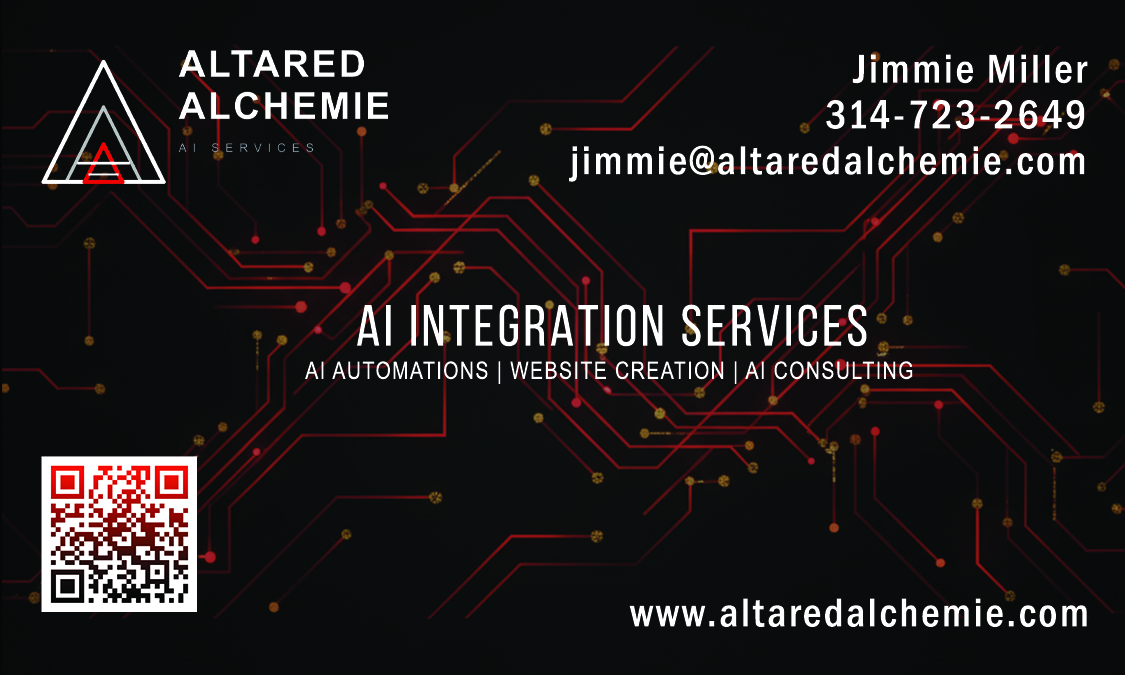
<style>
.page{position:relative;width:1125px;height:675px}
.page>*{position:absolute;margin:0}
.t1{font:41.7px/45.8px "FranklinGothic-MediumCond";letter-spacing:0.06em;color:#ffffff}
.t2{font:58px "BebasNeueRegular";letter-spacing:0.06em;color:#ffffff;text-transform:uppercase}
.t3{font:23.9px "ArialNarrow";letter-spacing:0.06em;color:#ffffff;text-transform:uppercase}
.t4{font:41.7px "FranklinGothic-MediumCond";letter-spacing:0.06em;color:#ffffff}
</style>
<div class="page">
<p class="t1" style="left:569px;top:54px;width:519px;height:128px;text-align:right">Jimmie Miller<br>314-723-2649<br>jimmie@altaredalchemie.com</p>
<p class="t2" style="left:357px;top:304px;width:510px;height:43px">ai integration services</p>
<p class="t3" style="left:305px;top:361px;width:608px;height:23px">ai automations | website creation | ai consulting</p>
<p class="t4" style="left:629px;top:598px;width:458px;height:29px">www.altaredalchemie.com</p>
</div>
